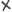
<style>
.page{position:relative;width:12px;height:12px;background:#ffffff}
.page>*{position:absolute;margin:0}
.t1{font:13px "CCComicrazy";color:#464646}
</style>
<div class="page">
<p class="t1" style="left:1px;top:0px;width:10px;height:12px;rotate:-6deg">X</p>
</div>
